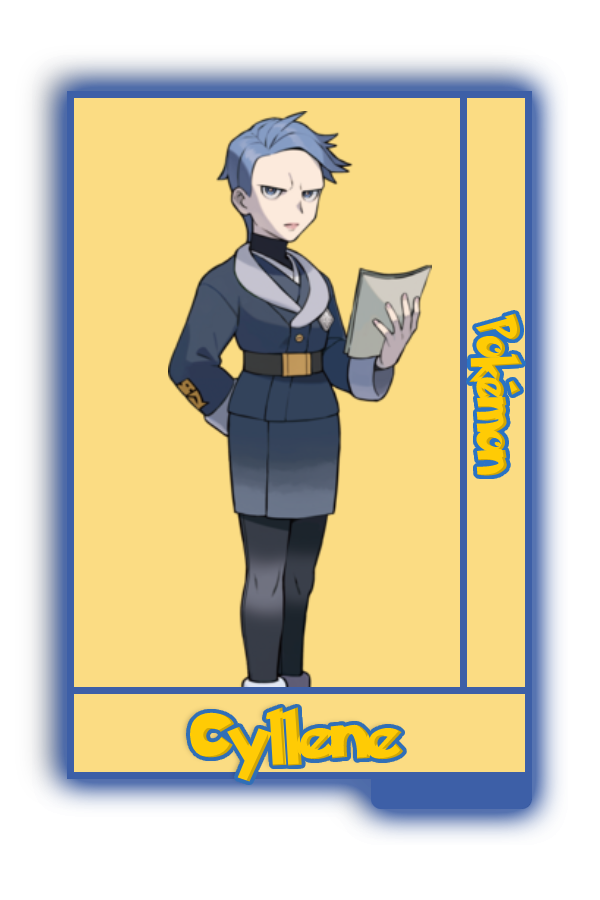
<style>
.page{position:relative;width:600px;height:900px;background:#fbdc83}
.page>*{position:absolute;margin:0}
.t1{font:48.8px "PokemonSolidNormal";color:#ffcb05;scale:0.8 1}
.t2{font:55.2px "PokemonSolidNormal";color:#ffcb05;scale:1.12 1}
</style>
<div class="page">
<p class="t1" style="left:469px;top:313px;width:54px;height:163px;rotate:90deg">Pokémon</p>
<p class="t2" style="left:190px;top:707px;width:214px;height:75px">Cyllene</p>
</div>
